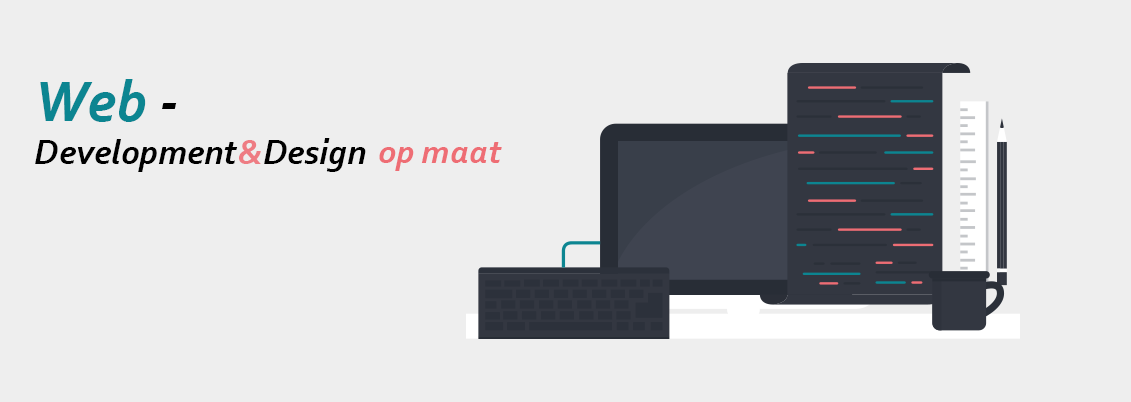
<style>
.page{position:relative;width:1131px;height:402px;background:#eeeeee}
.page>*{position:absolute;margin:0}
.t1{font:36px "Corbel-BoldItalic";color:#000000}
.t2{font:60px "Corbel-BoldItalic";color:#0c8591}
.t3{font:60px "Corbel-BoldItalic";color:#000000}
.t4{font:36px "Corbel-BoldItalic";color:#ee7c83}
.t5{font:35.4px "Corbel-BoldItalic";color:#ee6d74}
</style>
<div class="page">
<p class="t1" style="left:35px;top:79px;width:331px;height:93px"><span class="t2">Web </span><span class="t3">-<br></span>Development<span class="t4">&amp;</span>Design</p>
<p class="t5" style="left:379px;top:142px;width:123px;height:29px">op maat</p>
</div>
